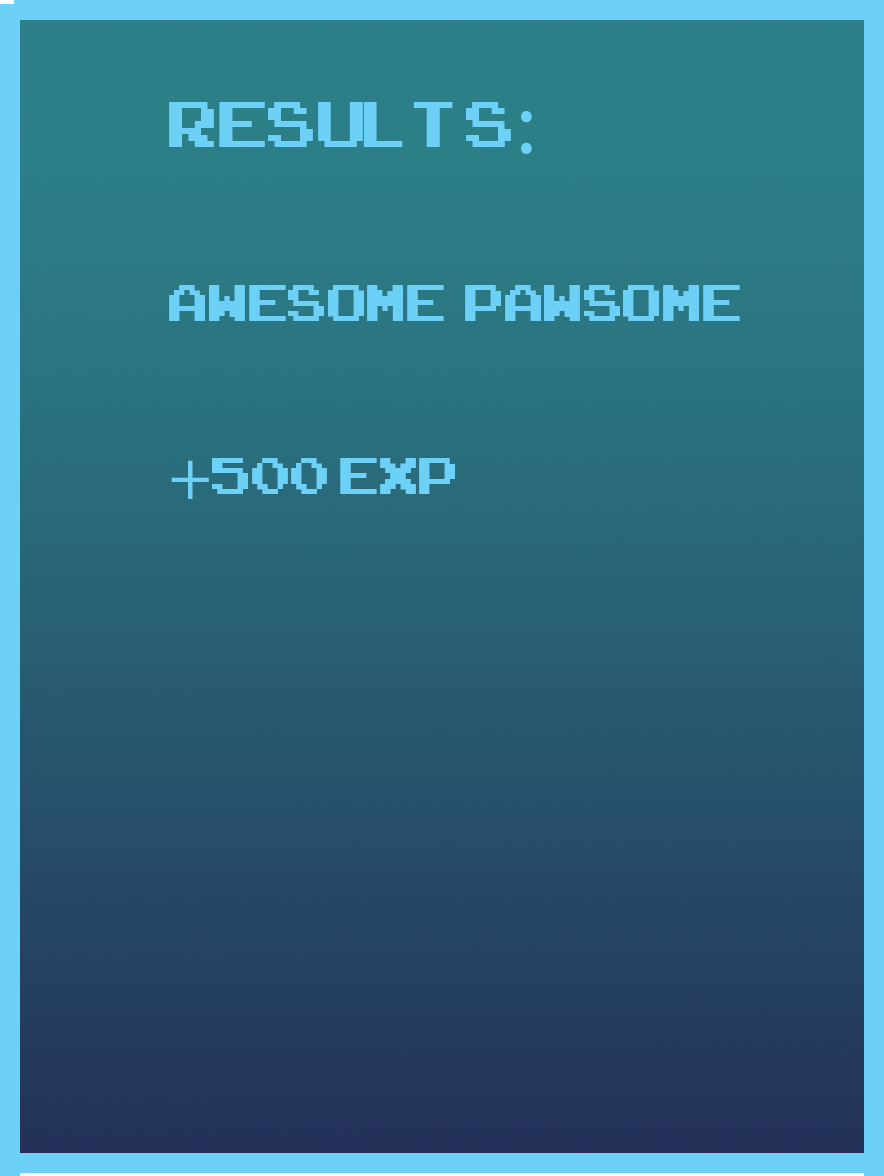
<style>
.page{position:relative;width:884px;height:1176px}
.page>*{position:absolute;margin:0}
.t1{font:72px "ArcadeClassic";color:#6dd0f7}
.t2{font:90px "ArcadeClassic";color:#6dd0f7}
.t3{font:90px "MyriadPro-Regular";color:#6dd0f7}
.t4{font:72px "MyriadPro-Regular";color:#6dd0f7}
</style>
<div class="page">
<p class="t1" style="left:169px;top:102px;width:571px;height:397px"><span class="t2">Results</span><span class="t3">:<br><br></span>Awesome  pawsome<br><br><span class="t4">+</span>500 exp</p>
</div>
